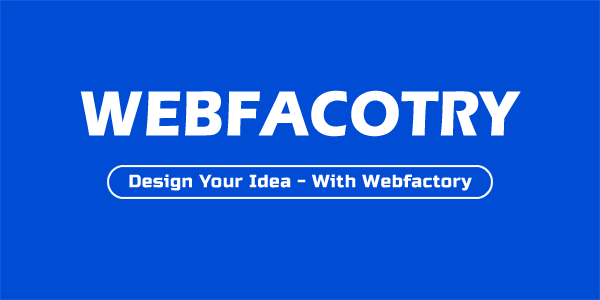
<style>
.page{position:relative;width:600px;height:300px;background:#014cd5}
.page>*{position:absolute;margin:0}
.t1{font:66px "ErasITC-Bold";color:#ffffff;text-transform:uppercase;scale:0.9 1}
.t2{font:18px "RussoOne-Regular";letter-spacing:0.025em;color:#ffffff}
</style>
<div class="page">
<p class="t1" style="left:80px;top:90px;width:441px;height:47px">webfacotry</p>
<p class="t2" style="left:129px;top:174px;width:343px;height:17px">Design Your Idea - With Webfactory</p>
</div>
